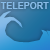
<style>
.page{position:relative;width:50px;height:50px}
.page>*{position:absolute;margin:0}
.t1{font:9px "Arial-BoldMT";color:#89bce8}
</style>
<div class="page">
<p class="t1" style="left:0px;top:2px;width:49px;height:7px">TELEPORT</p>
</div>
